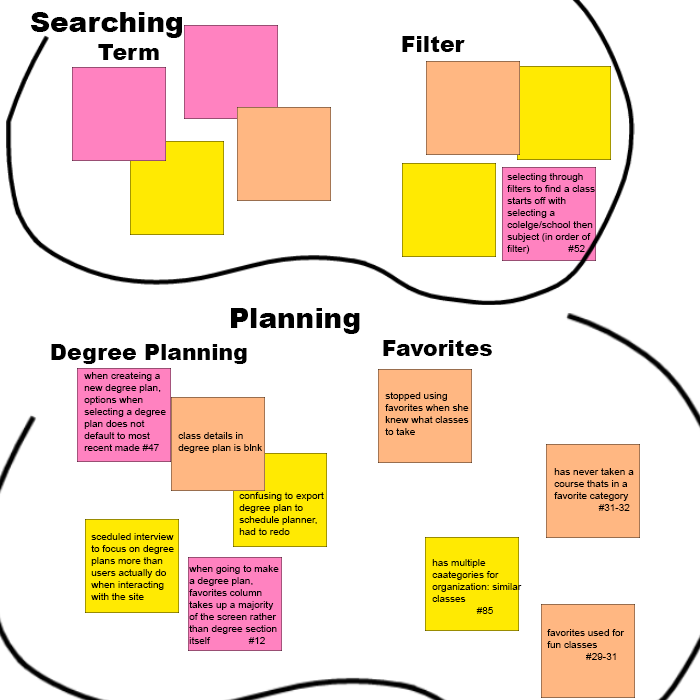
<style>
.page{position:relative;width:700px;height:700px;background:#ffffff}
.page>*{position:absolute;margin:0}
.t1{font:28px "Arial-Black";color:#000000}
.t2{font:22px "Arial-Black";color:#000000}
.t3{font:10px "ArialMT";color:#000000}
</style>
<div class="page">
<p class="t1" style="left:31px;top:12px;width:151px;height:26px">Searching</p>
<p class="t2" style="left:402px;top:36px;width:63px;height:16px">Filter</p>
<p class="t2" style="left:98px;top:44px;width:61px;height:16px">Term</p>
<p class="t3" style="left:507px;top:173px;width:88px;height:81px">selecting through filters to find a class starts off with selecting a colelge/school then subject (in order of filter)              #52</p>
<p class="t1" style="left:231px;top:308px;width:129px;height:26px">Planning</p>
<p class="t2" style="left:383px;top:340px;width:109px;height:16px">Favorites</p>
<p class="t2" style="left:51px;top:344px;width:196px;height:20px">Degree Planning</p>
<p class="t3" style="left:84px;top:372px;width:82px;height:79px">when createing a new degree plan, options when selecting a degree plan does not default to most recent made #47<br>  #47</p>
<p class="t3" style="left:385px;top:392px;width:84px;height:43px">stopped using favorites when she knew what classes to take</p>
<p class="t3" style="left:178px;top:432px;width:84px;height:21px">class details in degree plan is blnk</p>
<p class="t3" style="left:554px;top:468px;width:80px;height:43px">has never taken a course thats in a favorite category<br>                #31-32</p>
<p class="t3" style="left:239px;top:492px;width:85px;height:43px">confusing to export degree plan to schedule planner, had to redo</p>
<p class="t3" style="left:91px;top:533px;width:83px;height:67px">sceduled interview to focus on degree plans more than users actually do when interacting with the site</p>
<p class="t3" style="left:189px;top:565px;width:90px;height:79px">when going to make a degree plan, favorites column takes up a majority of the screen rather than degree section itself              #12</p>
<p class="t3" style="left:432px;top:559px;width:90px;height:55px">has multiple caategories for organization: similar classes<br>                #85</p>
<p class="t3" style="left:547px;top:629px;width:78px;height:31px">favorites used for fun classes<br>              #29-31</p>
</div>
